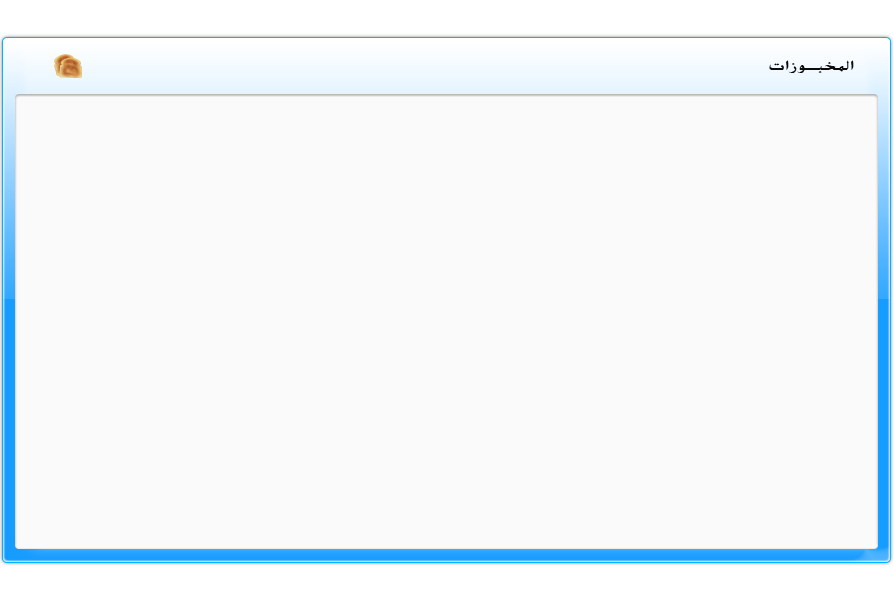
<style>
.page{position:relative;width:894px;height:600px;background:#fafafa}
.page>*{position:absolute;margin:0}
.t1{font:14.9px "BoutrosAdsMedium";color:#0c0b0b;scale:1.13 1}
</style>
<div class="page">
<p class="t1" style="left:769px;top:60px;width:85px;height:13px">المخبـوزات</p>
</div>
